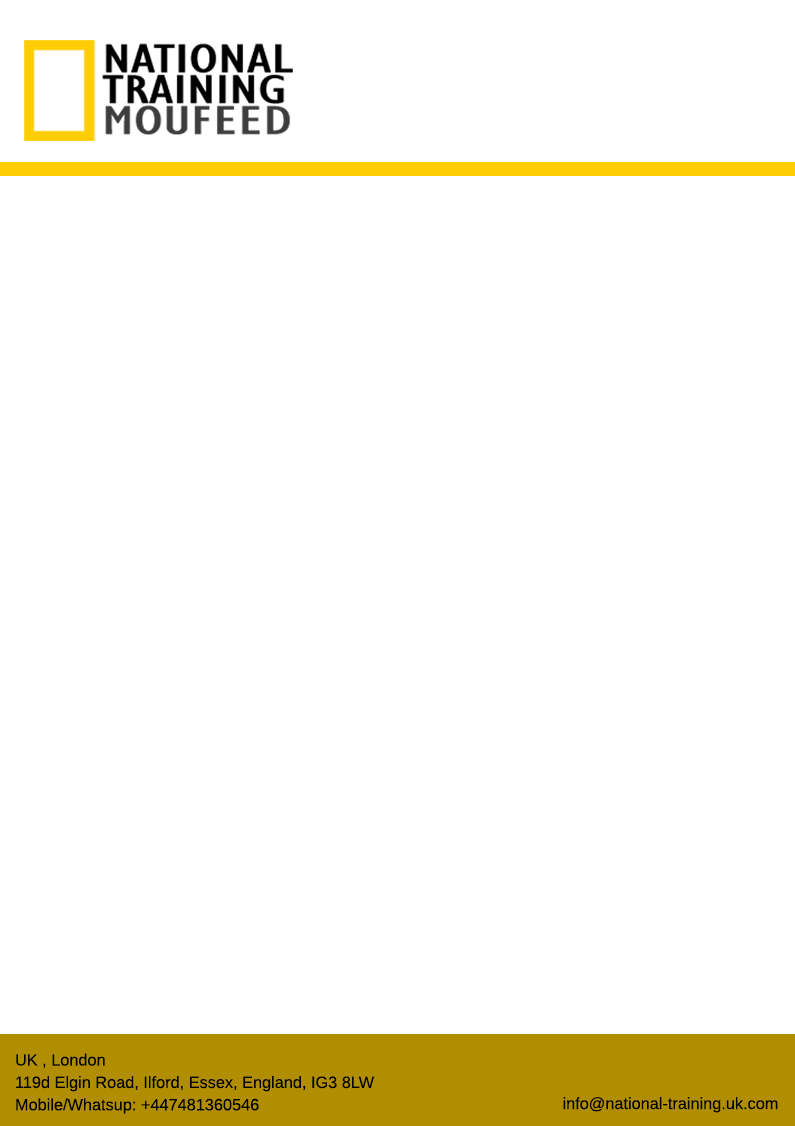
<style>
.page{position:relative;width:795px;height:1126px;background:#ffffff}
.page>*{position:absolute;margin:0}
.t1{font:16.3px/22.4px "Arimo";color:#000000}
.t2{font:16.3px "Arimo";color:#000000}
</style>
<div class="page">
<p class="t1" style="left:16px;top:1053px;width:359px;height:61px">UK , London<br>119d Elgin Road, Ilford, Essex, England, IG3 8LW<br>Mobile/Whatsup: +447481360546</p>
<p class="t2" style="left:563px;top:1097px;width:215px;height:16px">info@national-training.uk.com</p>
</div>
